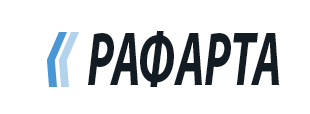
<style>
.page{position:relative;width:310px;height:114px;background:#ffffff}
.page>*{position:absolute;margin:0}
.t1{font:76.8px "MyriadPro-BoldIt";color:#141c23;text-transform:uppercase;scale:0.61 1}
</style>
<div class="page">
<p class="t1" style="left:88px;top:31px;width:191px;height:56px">Рафарта</p>
</div>
